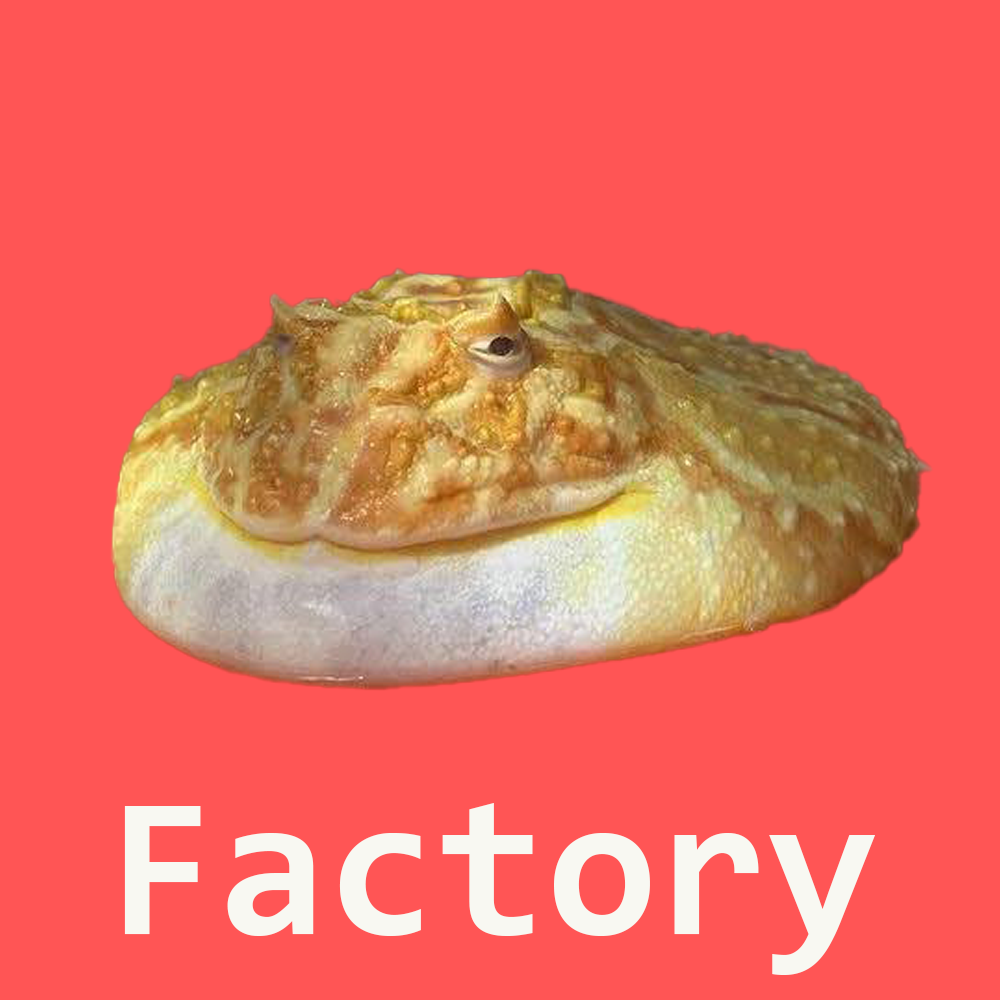
<style>
.page{position:relative;width:1000px;height:1000px;background:#ff5555}
.page>*{position:absolute;margin:0}
.t1{font:200px "Consolas-Bold";color:#f8f8f2}
</style>
<div class="page">
<p class="t1" style="left:124px;top:803px;width:752px;height:172px">Factory</p>
</div>
